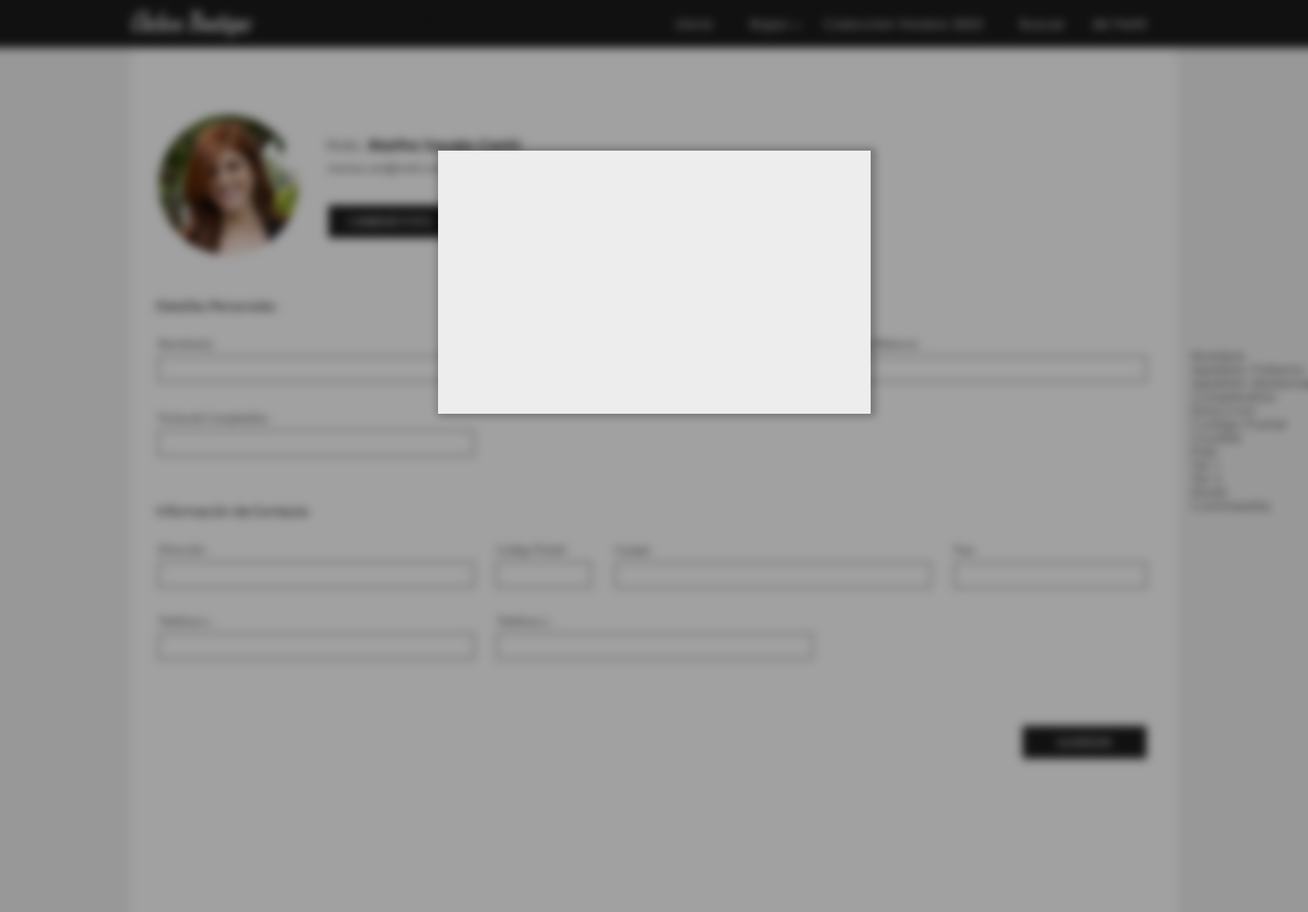
<style>
.page{position:relative;width:1308px;height:912px;background:#a1a1a1}
.page>*{position:absolute;margin:0}
.t1{font:12.3px "CenturyGothic";letter-spacing:0.075em;color:#262626}
.t2{font:12.3px/13.6px "CenturyGothic";letter-spacing:0.075em;color:#858585}
</style>
<div class="page">
<p class="t1" style="left:677px;top:20px;width:468px;height:11px">Inicio  Ropa  Coleccion Verano 2025  Buscar  Mi Perfil</p>
<p class="t2" style="left:1191px;top:352px;width:117px;height:158px">Nombre<br>Apellido Paterno<br>Apellido Materno<br>Cumpleaños<br>Direccion<br>Codigo Postal<br>Ciudad<br>Pais<br>Tel 1<br>Tel 2<br>Email<br>Contraseña</p>
</div>
